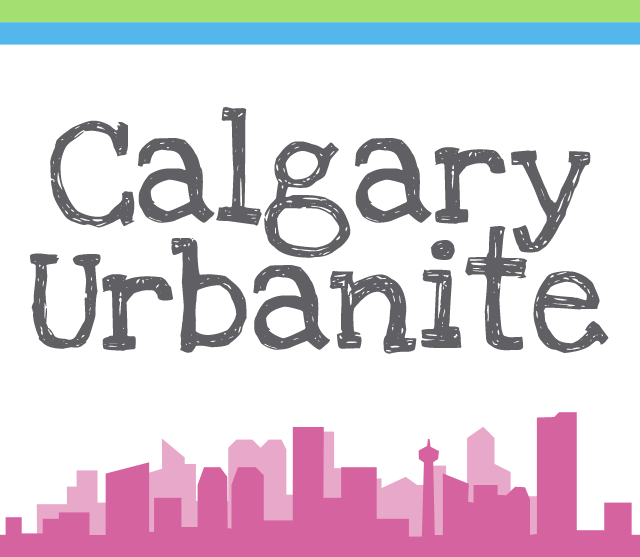
<style>
.page{position:relative;width:640px;height:557px;background:#ffffff}
.page>*{position:absolute;margin:0}
.t1{font:111.4px/127px "LoveYaLikeASister";color:#5f5f64}
</style>
<div class="page">
<p class="t1" style="left:30px;top:107px;width:579px;height:247px;text-align:center">Calgary<br>Urbanite</p>
</div>
